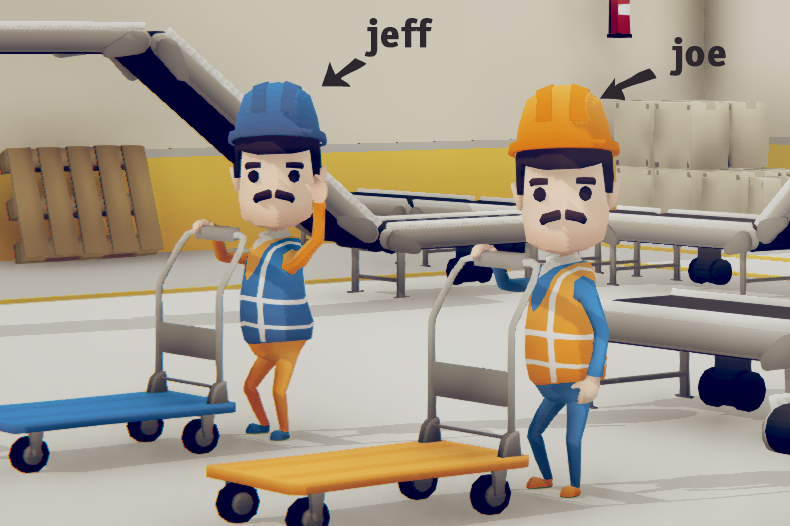
<style>
.page{position:relative;width:790px;height:526px}
.page>*{position:absolute;margin:0}
.t1{font:40px "OfficinaSansStd-Bold";color:#2c282d;font-weight:bold}
</style>
<div class="page">
<p class="t1" style="left:364px;top:18px;width:69px;height:39px">jeff</p>
<p class="t1" style="left:669px;top:37px;width:57px;height:39px">joe</p>
</div>
